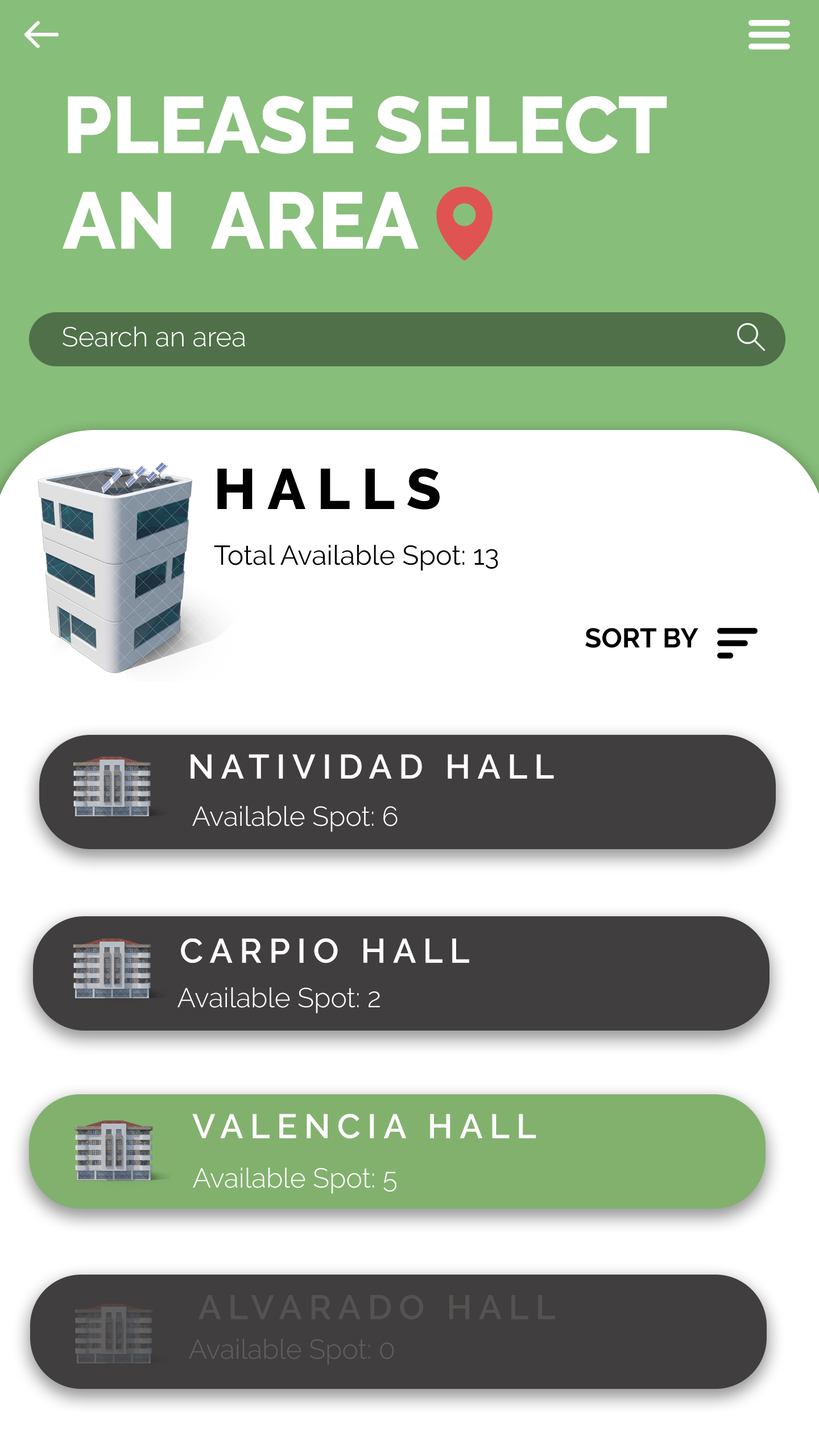
<style>
.page{position:relative;width:819px;height:1456px;background:#ffffff}
.page>*{position:absolute;margin:0}
.t1{font:79.6px "Raleway-ExtraBold";color:#ffffff}
.t2{font:27.3px "Raleway-Light";color:#ffffff}
.t3{font:56.9px "Raleway-ExtraBold";letter-spacing:0.2em;color:#000000}
.t4{font:27.3px "Raleway-Regular";color:#000000}
.t5{font:27.3px "Raleway-Bold";color:#000000}
.t6{font:34.1px "Raleway-SemiBold";letter-spacing:0.2em;color:#ffffff}
.t7{font:34.1px "Raleway-SemiBold";letter-spacing:0.2em;color:#565252}
.t8{font:27.3px "Raleway-Light";color:#605e5e}
</style>
<div class="page">
<p class="t1" style="left:63px;top:96px;width:604px;height:153px">PLEASE SELECT <br>AN  AREA</p>
<p class="t2" style="left:63px;top:326px;width:182px;height:21px">Search an area</p>
<p class="t3" style="left:217px;top:468px;width:223px;height:42px">HALLS</p>
<p class="t4" style="left:214px;top:545px;width:284px;height:26px">Total Available Spot: 13</p>
<p class="t5" style="left:585px;top:628px;width:113px;height:20px">SORT BY</p>
<p class="t6" style="left:191px;top:754px;width:363px;height:25px">NATIVIDAD HALL</p>
<p class="t2" style="left:192px;top:806px;width:206px;height:26px">Available Spot: 6</p>
<p class="t6" style="left:181px;top:938px;width:288px;height:25px">CARPIO HALL</p>
<p class="t2" style="left:177px;top:987px;width:203px;height:26px">Available Spot: 2</p>
<p class="t6" style="left:192px;top:1114px;width:344px;height:25px">VALENCIA HALL</p>
<p class="t2" style="left:193px;top:1168px;width:203px;height:26px">Available Spot: 5</p>
<p class="t7" style="left:198px;top:1294px;width:357px;height:25px">ALVARADO HALL</p>
<p class="t8" style="left:189px;top:1339px;width:205px;height:26px">Available Spot: 0</p>
</div>
